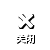
<style>
.page{position:relative;width:50px;height:50px;background:#ffffff}
.page>*{position:absolute;margin:0}
.t1{font:10px "AdobeHeitiStd-Regular";letter-spacing:-0.05em;color:#ffffff}
.t2{font:10px "AdobeHeitiStd-Regular";letter-spacing:-0.05em}
</style>
<div class="page">
<p class="t1" style="left:15px;top:33px;width:19px;height:10px">关闭</p>
<p class="t2" style="left:16px;top:34px;width:19px;height:10px">关闭</p>
</div>
